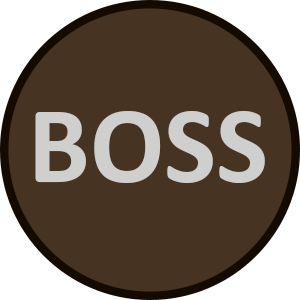
<style>
.page{position:relative;width:300px;height:300px;background:#473322}
.page>*{position:absolute;margin:0}
.t1{font:110px "Calibri-Bold";color:#cfcfce}
</style>
<div class="page">
<p class="t1" style="left:35px;top:111px;width:230px;height:72px">BOSS</p>
</div>
